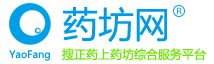
<style>
.page{position:relative;width:214px;height:64px;background:#ffffff}
.page>*{position:absolute;margin:0}
.t1{font:36px "MicrosoftYaHei";color:#009ce7}
.t2{font:10px "MicrosoftYaHei";color:#009ce7}
.t3{font:12px "MicrosoftYaHei";color:#6de700}
</style>
<div class="page">
<p class="t1" style="left:63px;top:7px;width:104px;height:35px">药坊网</p>
<p class="t2" style="left:9px;top:50px;width:41px;height:11px">YaoFang</p>
<p class="t3" style="left:62px;top:48px;width:144px;height:13px">搜正药上药坊综合服务平台</p>
</div>
